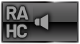
<style>
.page{position:relative;width:80px;height:44px}
.page>*{position:absolute;margin:0}
.t1{font:18.7px "Barlow-Bold";letter-spacing:-0.05em;color:#9e9e9e}
</style>
<div class="page">
<p class="t1" style="left:6px;top:6px;width:23px;height:14px">RA</p>
<p class="t1" style="left:6px;top:24px;width:21px;height:14px">HC</p>
</div>
